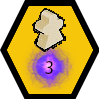
<style>
.page{position:relative;width:99px;height:99px;background:#ffffff}
.page>*{position:absolute;margin:0}
.t1{font:16.7px "KozGoPr6N-Regular";color:#000000}
</style>
<div class="page">
<p class="t1" style="left:45px;top:61px;width:8px;height:13px">3</p>
</div>
